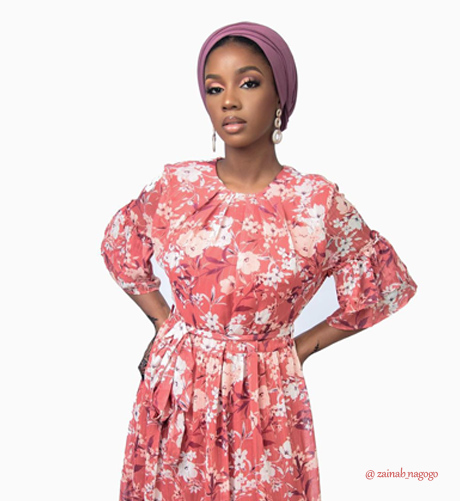
<style>
.page{position:relative;width:460px;height:501px;background:#fafafa}
.page>*{position:absolute;margin:0}
.t1{font:14px "Gabriola";letter-spacing:-0.02em;color:#d15f5e;scale:1.04 1}
</style>
<div class="page">
<p class="t1" style="left:365px;top:467px;width:73px;height:14px">@ zainab_nagogo</p>
</div>
